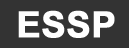
<style>
.page{position:relative;width:129px;height:48px;background:#333333}
.page>*{position:absolute;margin:0}
.t1{font:36px "Arial-BoldMT";color:#ffffff;text-transform:uppercase;font-weight:bold}
</style>
<div class="page">
<p class="t1" style="left:18px;top:10px;width:97px;height:28px">ESSP</p>
</div>
